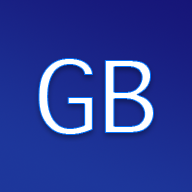
<style>
.page{position:relative;width:192px;height:192px}
.page>*{position:absolute;margin:0}
.t1{font:96px "Sathu";color:#ffffff}
</style>
<div class="page">
<p class="t1" style="left:38px;top:58px;width:116px;height:77px">GB</p>
</div>
